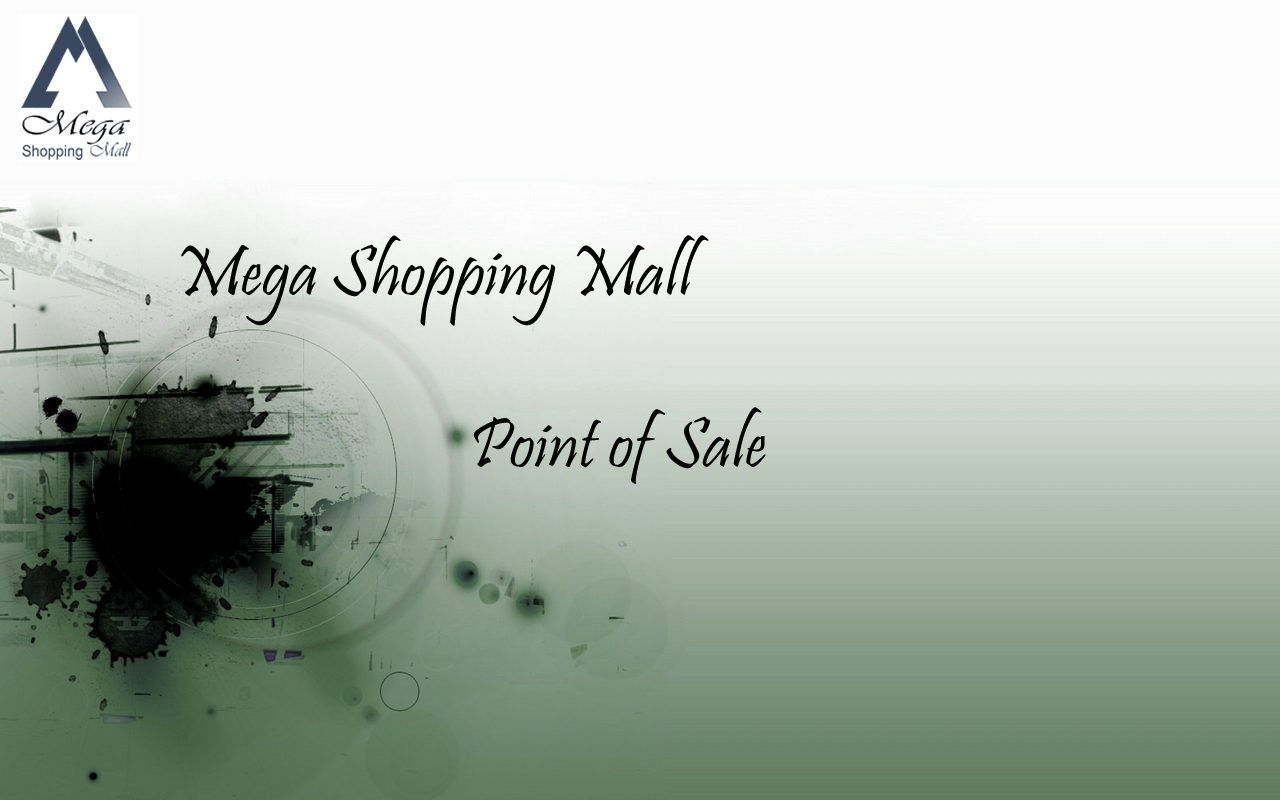
<style>
.page{position:relative;width:1280px;height:800px;background:#fcfcfc}
.page>*{position:absolute;margin:0}
.t1{font:72px "Pristina-Regular";color:#000000}
</style>
<div class="page">
<p class="t1" style="left:174px;top:235px;width:535px;height:95px">Mega Shopping Mall</p>
<p class="t1" style="left:469px;top:407px;width:297px;height:95px">Point of Sale</p>
</div>
